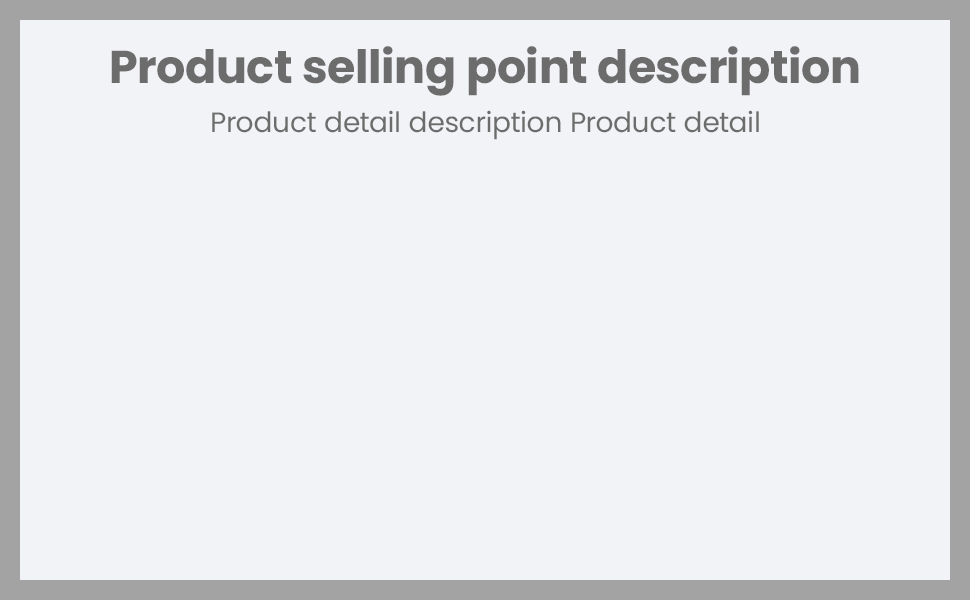
<style>
.page{position:relative;width:970px;height:600px;background:#f2f3f6}
.page>*{position:absolute;margin:0}
.t1{font:46px "Poppins-Bold";color:#6c6c6c}
.t2{font:28px "Poppins-Regular";color:#6c6c6c}
</style>
<div class="page">
<p class="t1" style="left:111px;top:46px;width:748px;height:50px">Product selling point description</p>
<p class="t2" style="left:212px;top:110px;width:547px;height:30px">Product detail description Product detail</p>
</div>
